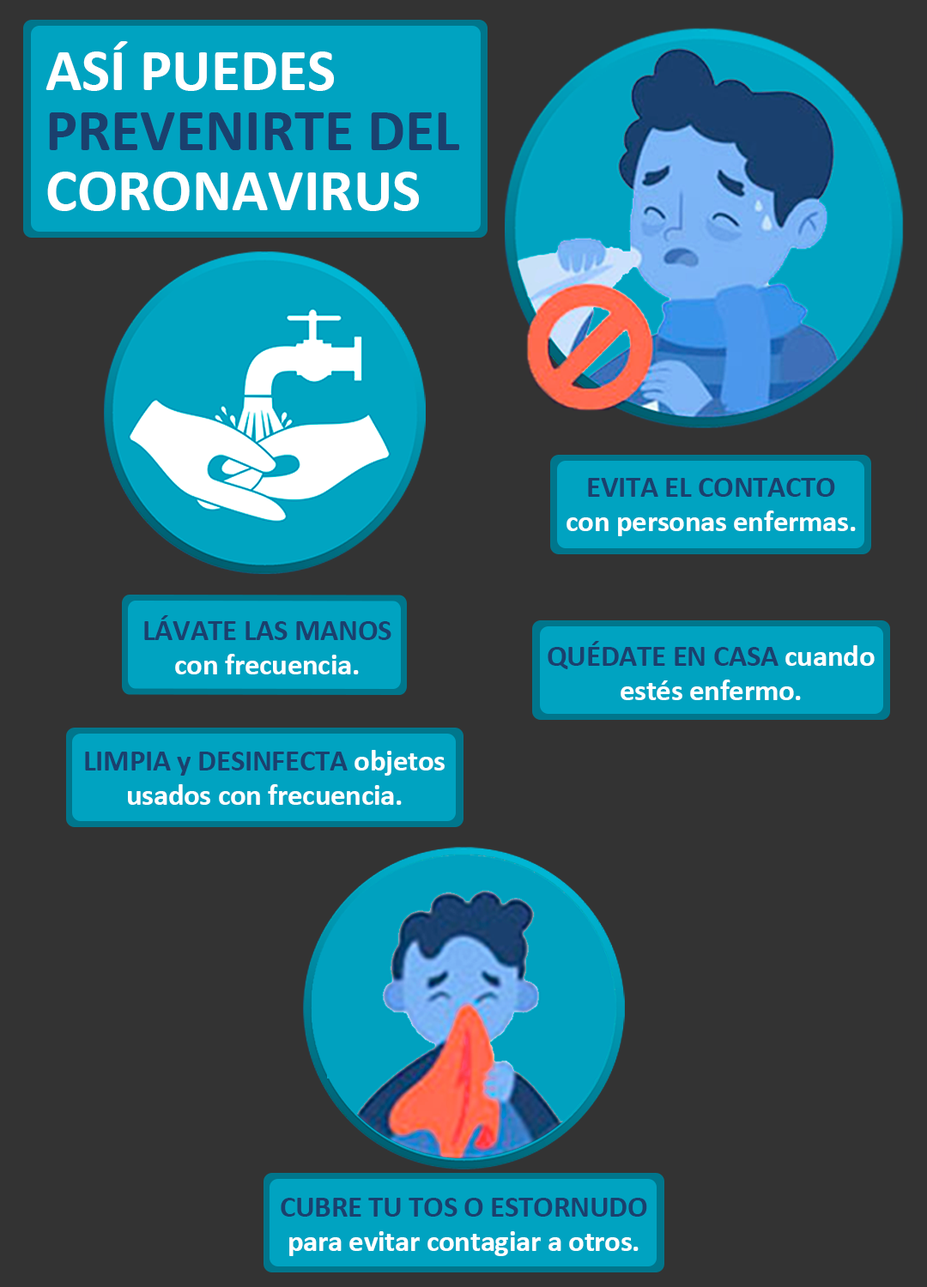
<style>
.page{position:relative;width:927px;height:1287px;background:#333333}
.page>*{position:absolute;margin:0}
.t1{font:60.1px/60.1px "Calibri-Bold";color:#1a406e}
.t2{font:60.1px/60.1px "Calibri-Bold";color:#ffffff}
.t3{font:30px/34.3px "Calibri-Bold";letter-spacing:-0.01em;color:#ffffff}
.t4{font:30px/34.3px "Calibri-Bold";letter-spacing:-0.01em;color:#1a406e}
</style>
<div class="page">
<p class="t1" style="left:45px;top:41px;width:415px;height:170px"><span class="t2">ASÍ PUEDES<br></span>PREVENIRTE DEL<br><span class="t2">CORONAVIRUS</span></p>
<p class="t3" style="left:566px;top:478px;width:289px;height:58px;text-align:center"><span class="t4">EVITA EL CONTACTO<br></span>con personas enfermas.</p>
<p class="t4" style="left:144px;top:615px;width:247px;height:59px;text-align:center">LÁVATE LAS MANOS<br><span class="t3">con frecuencia.</span></p>
<p class="t3" style="left:547px;top:641px;width:327px;height:59px;text-align:center"><span class="t4">QUÉDATE EN CASA</span> cuando<br>estés enfermo.</p>
<p class="t3" style="left:85px;top:750px;width:359px;height:55px;text-align:center"><span class="t4">LIMPIA y DESINFECTA</span> objetos<br>usados con frecuencia.</p>
<p class="t3" style="left:281px;top:1198px;width:366px;height:58px;text-align:center"><span class="t4">CUBRE TU TOS O ESTORNUDO<br></span>para evitar contagiar a otros.</p>
</div>
